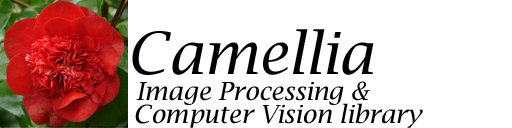
<style>
.page{position:relative;width:512px;height:128px;background:#ffffff}
.page>*{position:absolute;margin:0}
.t1{font:58.1px "LucidaBright-Italic";color:#000000}
.t2{font:24.9px "LucidaBright-Italic";color:#000000}
</style>
<div class="page">
<p class="t1" style="left:132px;top:29px;width:242px;height:46px">Camellia</p>
<p class="t2" style="left:136px;top:81px;width:235px;height:24px">Image Processing &amp;</p>
<p class="t2" style="left:135px;top:103px;width:288px;height:25px">Computer Vision library</p>
</div>
